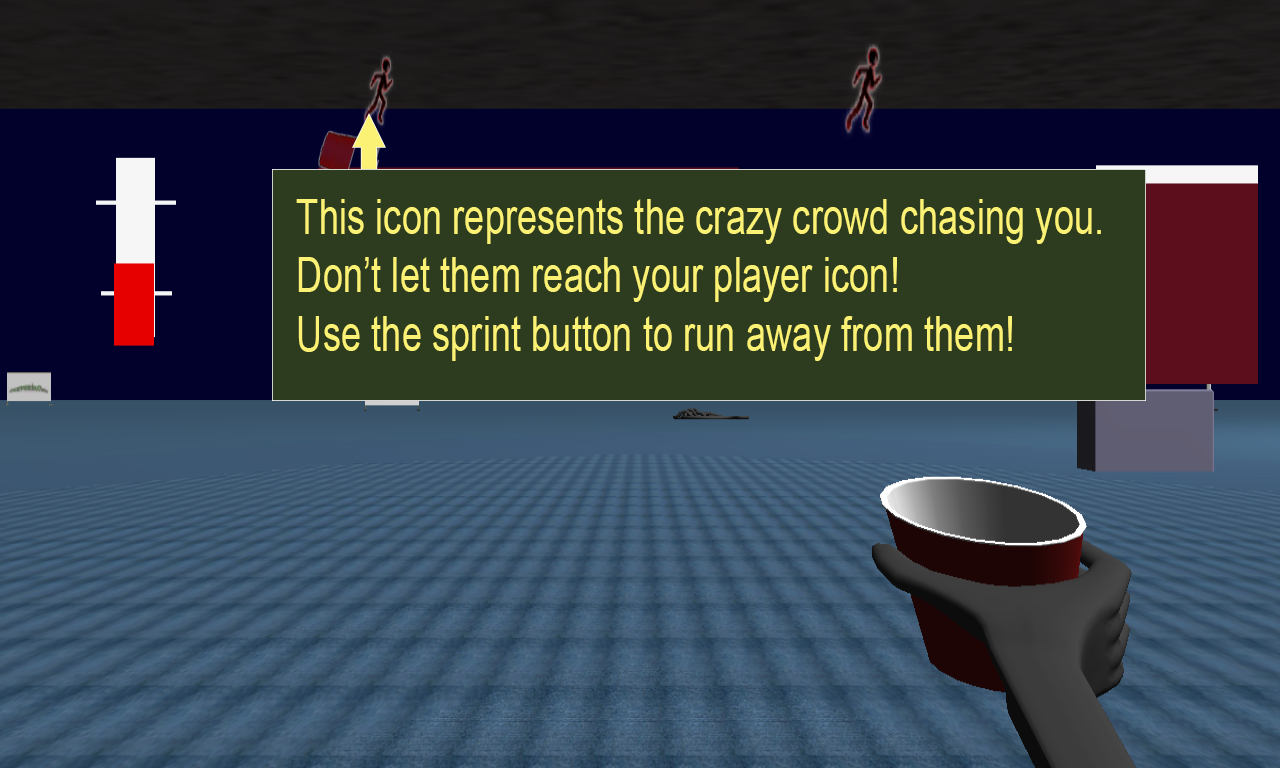
<style>
.page{position:relative;width:1280px;height:768px}
.page>*{position:absolute;margin:0}
.t1{font:48.9px "ArialMT";color:#fbf174;scale:0.75 1}
</style>
<div class="page">
<p class="t1" style="left:296px;top:199px;width:805px;height:162px">This icon represents the crazy crowd chasing you.<br>Don’t let them reach your player icon!<br>Use the sprint button to run away from them!</p>
</div>
